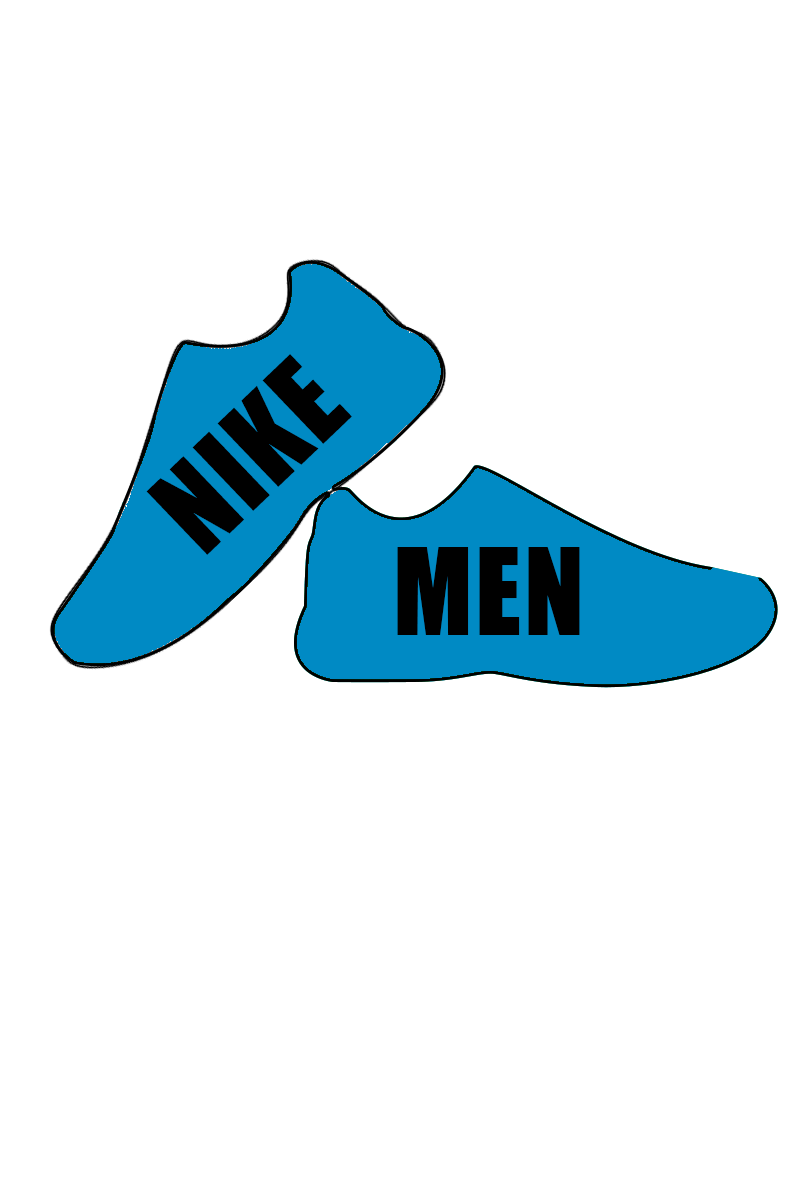
<style>
.page{position:relative;width:800px;height:1200px;background:#ffffff}
.page>*{position:absolute;margin:0}
.t1{font:111.1px "Impact";letter-spacing:0.025em;color:#000000}
</style>
<div class="page">
<p class="t1" style="left:146px;top:354px;width:206px;height:201px;rotate:-44deg">NIKE</p>
<p class="t1" style="left:397px;top:547px;width:183px;height:88px">MEN</p>
</div>
